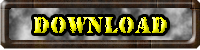
<style>
.page{position:relative;width:200px;height:50px}
.page>*{position:absolute;margin:0}
.t1{font:24px "RubberStampLetPlain"}
</style>
<div class="page">
<p class="t1" style="left:34px;top:17px;width:133px;height:16px">DOWNLOAD</p>
</div>
